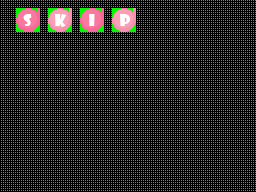
<style>
.page{position:relative;width:256px;height:192px;background:#000000}
.page>*{position:absolute;margin:0}
.t1{font:16px "ShowcardGothic-Reg";letter-spacing:0.025em;color:#ffffff}
.t2{font:16px "ShowcardGothic-Reg";letter-spacing:0.025em;color:#ffffff;scale:1.05 1}
</style>
<div class="page">
<p class="t1" style="left:23px;top:14px;width:9px;height:12px">S</p>
<p class="t1" style="left:55px;top:14px;width:12px;height:13px">k</p>
<p class="t2" style="left:89px;top:14px;width:6px;height:12px">i</p>
<p class="t1" style="left:120px;top:14px;width:10px;height:12px">p</p>
</div>
